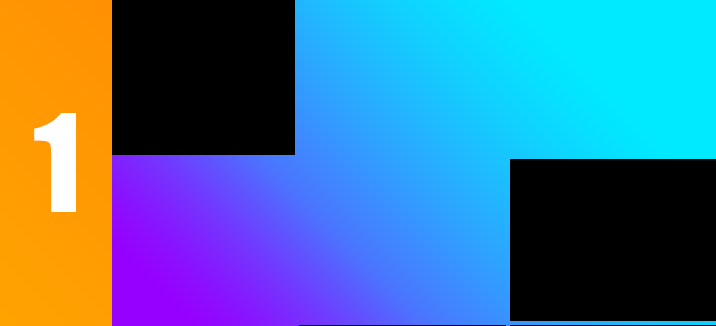
<style>
.page{position:relative;width:716px;height:326px;background:#000000}
.page>*{position:absolute;margin:0}
.t1{font:125px "Impact";color:#ffffff}
</style>
<div class="page">
<p class="t1" style="left:34px;top:113px;width:42px;height:99px">1</p>
</div>
